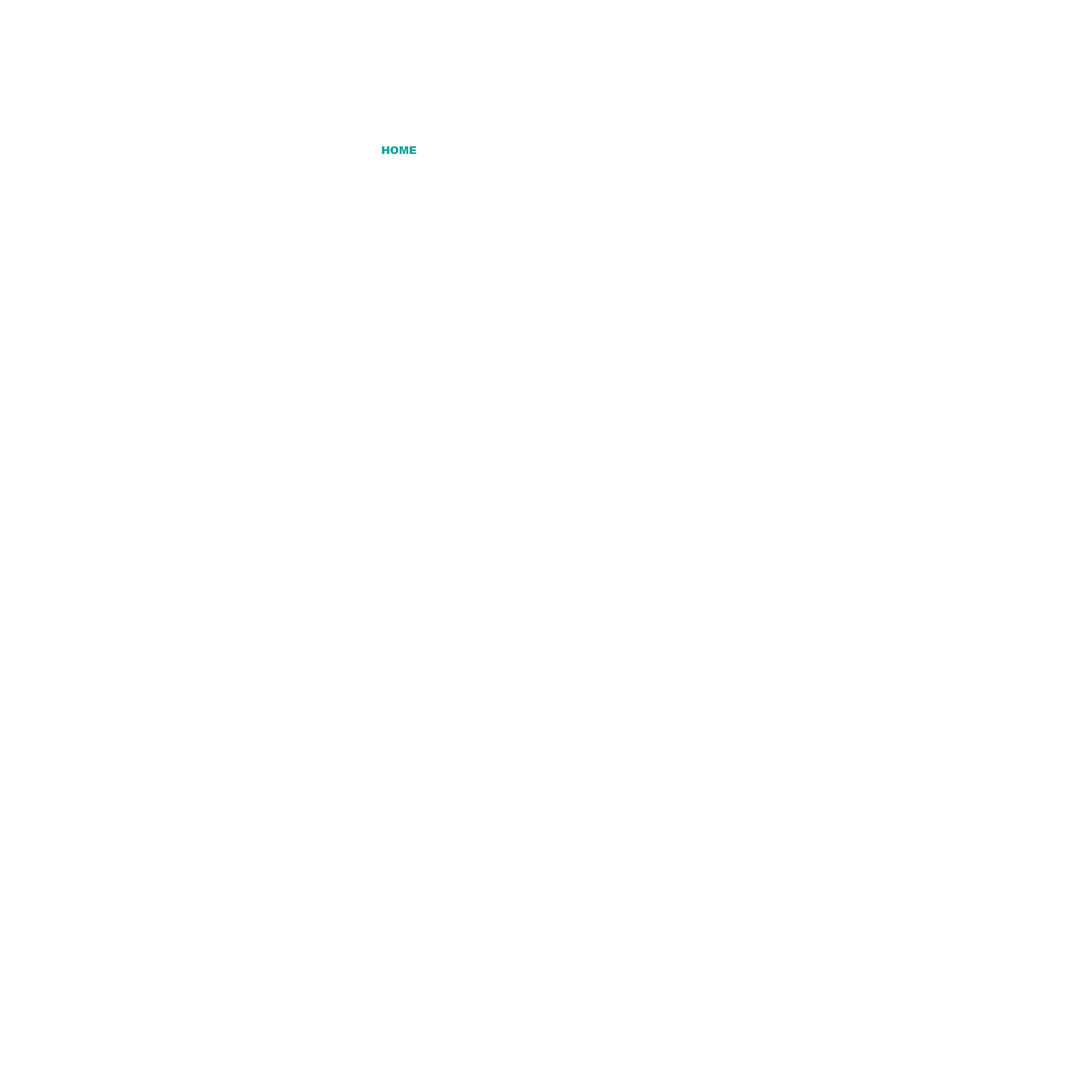
<style>
.page{position:relative;width:1092px;height:1092px;background:#ffffff}
.page>*{position:absolute;margin:0}
.t1{font:10.6px "Arial-Black";color:#0ba39c}
</style>
<div class="page">
<p class="t1" style="left:381px;top:146px;width:35px;height:8px">HOME</p>
</div>
